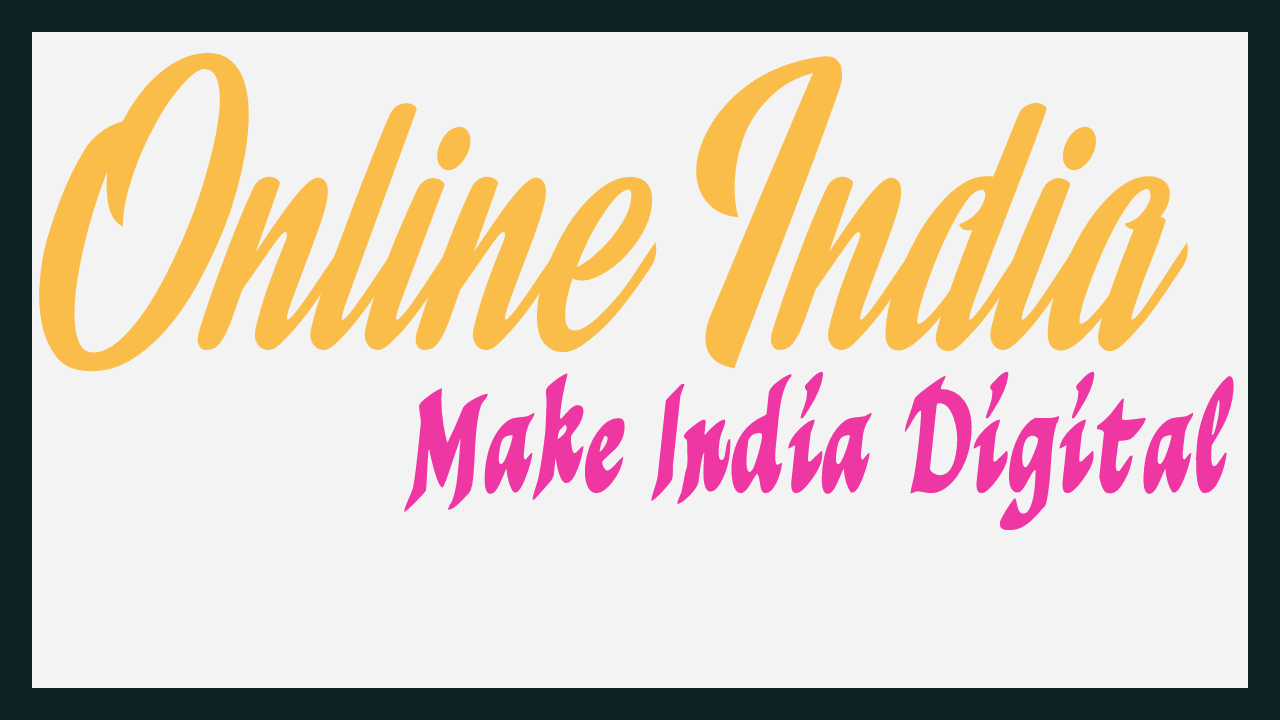
<style>
.page{position:relative;width:1280px;height:720px;background:#f3f3f3}
.page>*{position:absolute;margin:0}
.t1{font:489.5px "ROOSTERPERSONALUSE";color:#fabd49;font-style:italic;scale:0.59 1}
.t2{font:149.4px "MothproofScript";color:#ef37a3;font-style:italic;scale:0.59 1}
</style>
<div class="page">
<p class="t1" style="left:39px;top:52px;width:1149px;height:320px">Online India</p>
<p class="t2" style="left:404px;top:371px;width:830px;height:160px">Make India Digital</p>
</div>
